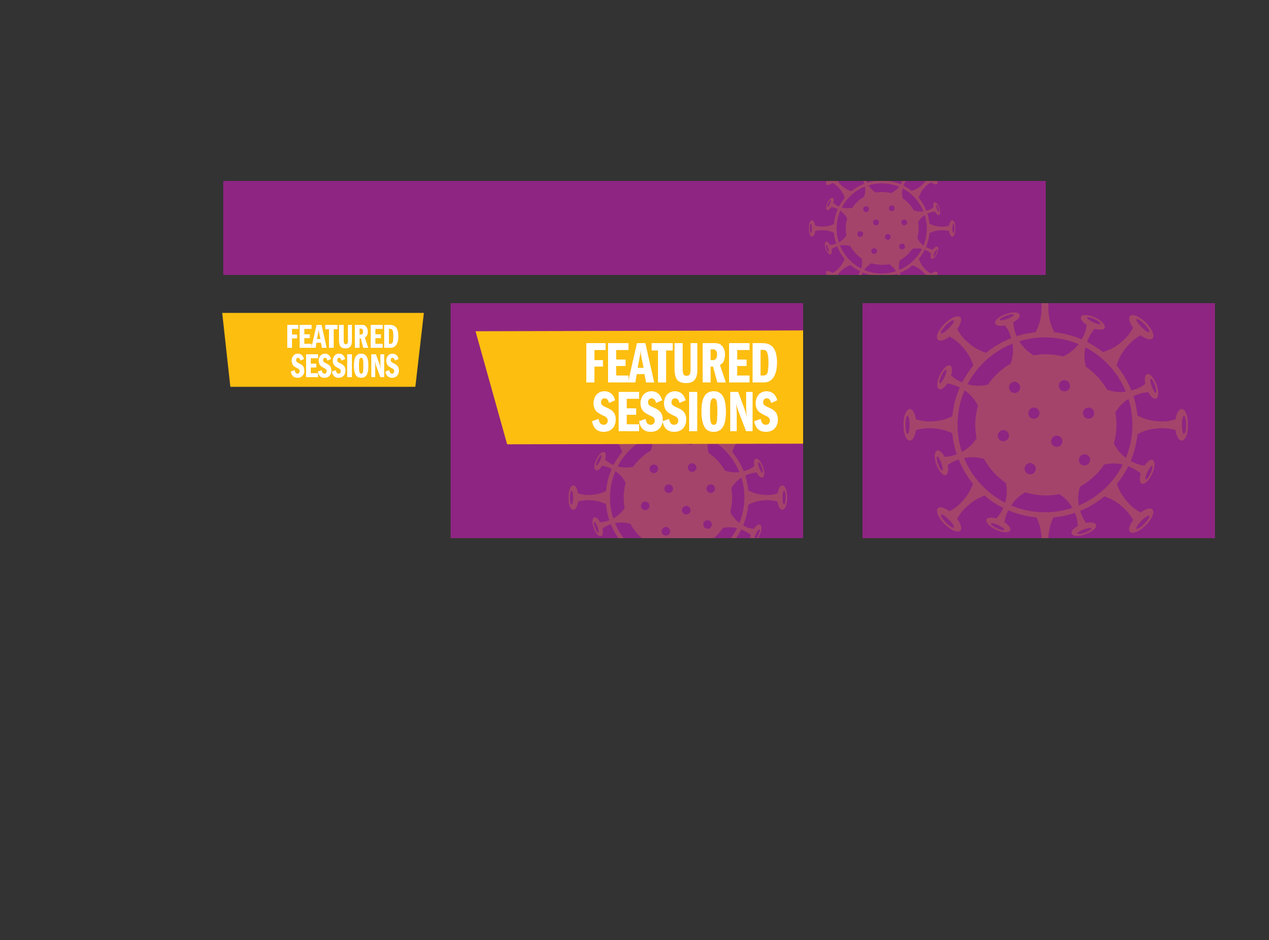
<style>
.page{position:relative;width:1269px;height:940px;background:#333333}
.page>*{position:absolute;margin:0}
.t1{font:34.3px/29.4px "ITCFranklinGothicStd-DmCp";letter-spacing:-0.01em;color:#ffffff;text-transform:uppercase}
.t2{font:58.7px/48.9px "ITCFranklinGothicStd-DmCp";letter-spacing:-0.01em;color:#ffffff;text-transform:uppercase}
</style>
<div class="page">
<p class="t1" style="left:287px;top:325px;width:112px;height:53px;text-align:right">Featured<br>Sessions</p>
<p class="t2" style="left:586px;top:343px;width:192px;height:89px;text-align:right">Featured<br>Sessions</p>
</div>
